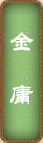
<style>
.page{position:relative;width:43px;height:143px}
.page>*{position:absolute;margin:0}
.t1{font:25px "STLiti";color:#ffffff}
</style>
<div class="page">
<p class="t1" style="left:10px;top:32px;width:24px;height:73px">金<br>庸</p>
</div>
